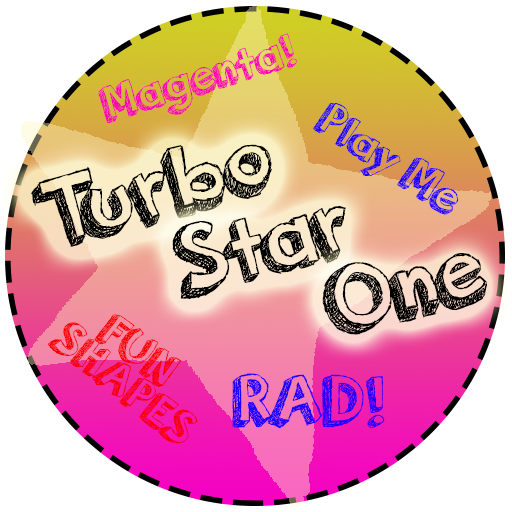
<style>
.page{position:relative;width:512px;height:512px;background:#ffffff}
.page>*{position:absolute;margin:0}
.t1{font:12px "orangejuice";letter-spacing:0.02em;color:#ff00b4}
.t2{font:12px "orangejuice";letter-spacing:0.02em;color:#1e00ff}
.t3{font:100px "orangejuice";letter-spacing:-0.005em;color:#000000}
.t4{font:50px "orangejuice";letter-spacing:0.02em;color:#f90000}
.t5{font:75px "orangejuice";letter-spacing:0.02em;color:#1e00ff}
</style>
<div class="page">
<p class="t1" style="left:98px;top:33px;width:200px;height:91px;rotate:-17deg">!Magenta</p>
<p class="t2" style="left:313px;top:103px;width:146px;height:112px;rotate:33deg">Play Me</p>
<p class="t3" style="left:31px;top:144px;width:241px;height:103px;rotate:-15deg">Turbo</p>
<p class="t3" style="left:172px;top:206px;width:174px;height:93px;rotate:-15deg">Star</p>
<p class="t3" style="left:322px;top:253px;width:165px;height:82px;rotate:-15deg">One</p>
<p class="t4" style="left:94px;top:314px;width:88px;height:73px;rotate:37deg">FUN</p>
<p class="t4" style="left:47px;top:322px;width:151px;height:122px;rotate:38deg">SHAPES</p>
<p class="t5" style="left:232px;top:373px;width:153px;height:56px">!RAD</p>
</div>
